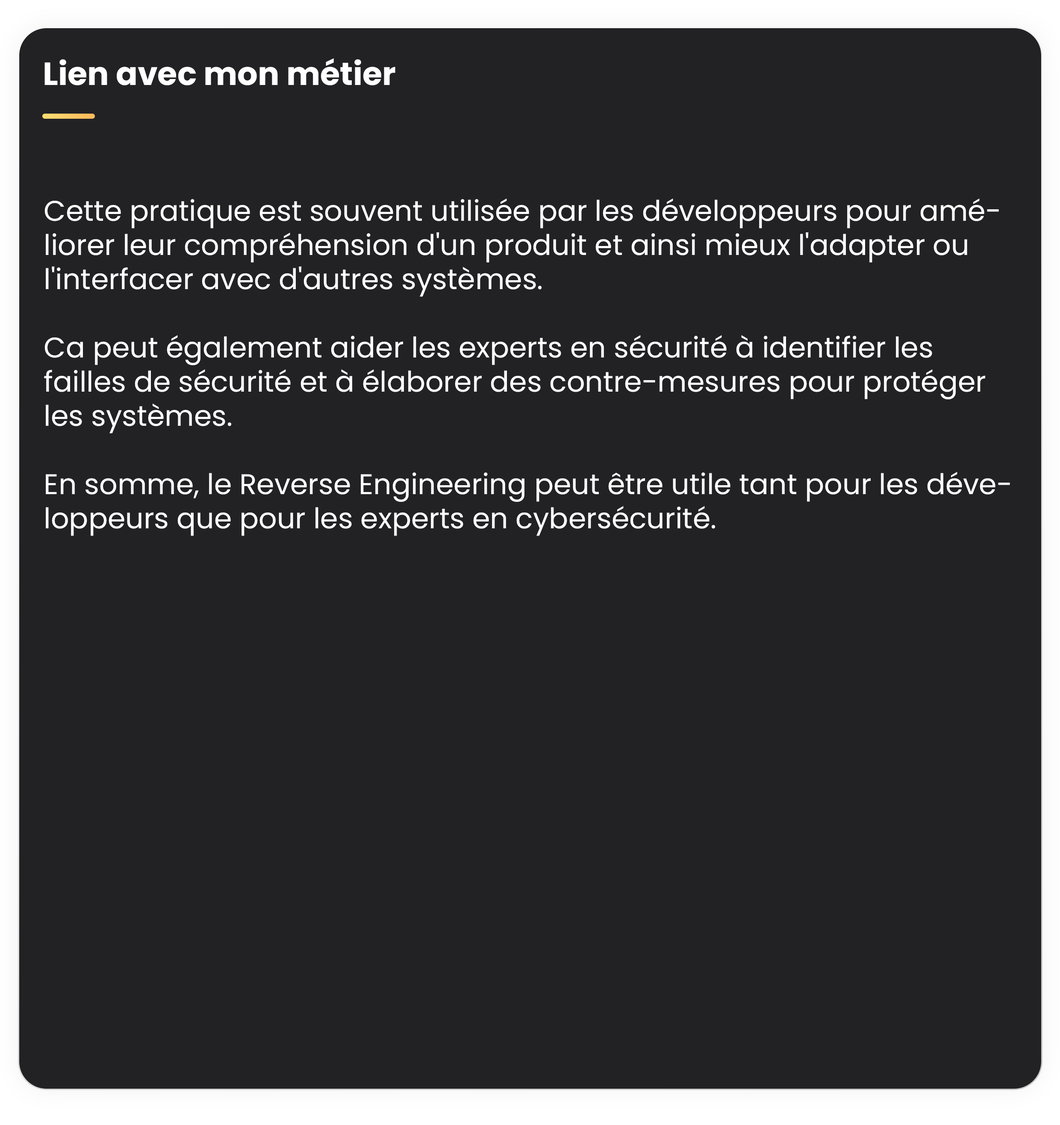
<style>
.page{position:relative;width:1060px;height:1125px;background:#222224}
.page>*{position:absolute;margin:0}
.t1{font:32px "Poppins-Bold";color:#ffffff}
.t2{font:28.5px "Poppins-Regular";color:#ffffff}
</style>
<div class="page">
<p class="t1" style="left:44px;top:58px;width:351px;height:27px">Lien avec mon métier</p>
<p class="t2" style="left:44px;top:199px;width:966px;height:337px">Cette pratique est souvent utilisée par les développeurs pour améliorer leur compréhension d'un produit et ainsi mieux l'adapter ou l'interfacer avec d'autres systèmes.<br><br>Ca peut également aider les experts en sécurité à identifier les failles de sécurité et à élaborer des contre-mesures pour protéger les systèmes.<br><br>En somme, le Reverse Engineering peut être utile tant pour les développeurs que pour les experts en cybersécurité.</p>
</div>
